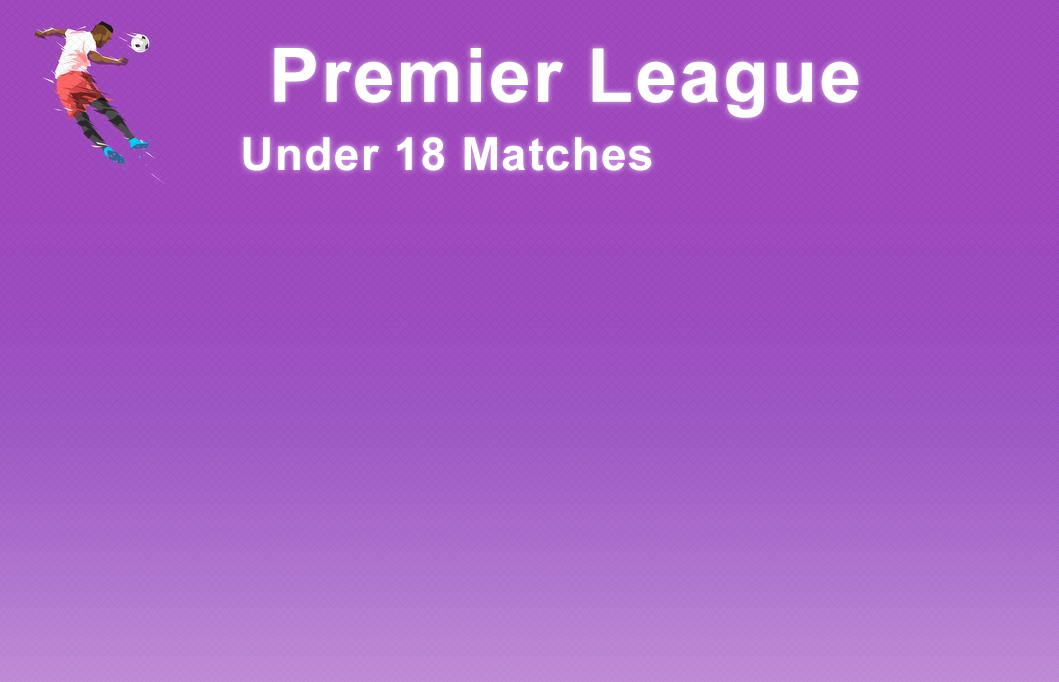
<style>
.page{position:relative;width:1059px;height:682px}
.page>*{position:absolute;margin:0}
.t1{font:75px "Arial-BoldMT";letter-spacing:0.03em;color:#ffffff}
.t2{font:45.8px "Arial-BoldMT";letter-spacing:0.03em;color:#ffffff}
</style>
<div class="page">
<p class="t1" style="left:274px;top:48px;width:585px;height:70px">Premier League</p>
<p class="t2" style="left:243px;top:137px;width:409px;height:34px">Under 18 Matches</p>
</div>
